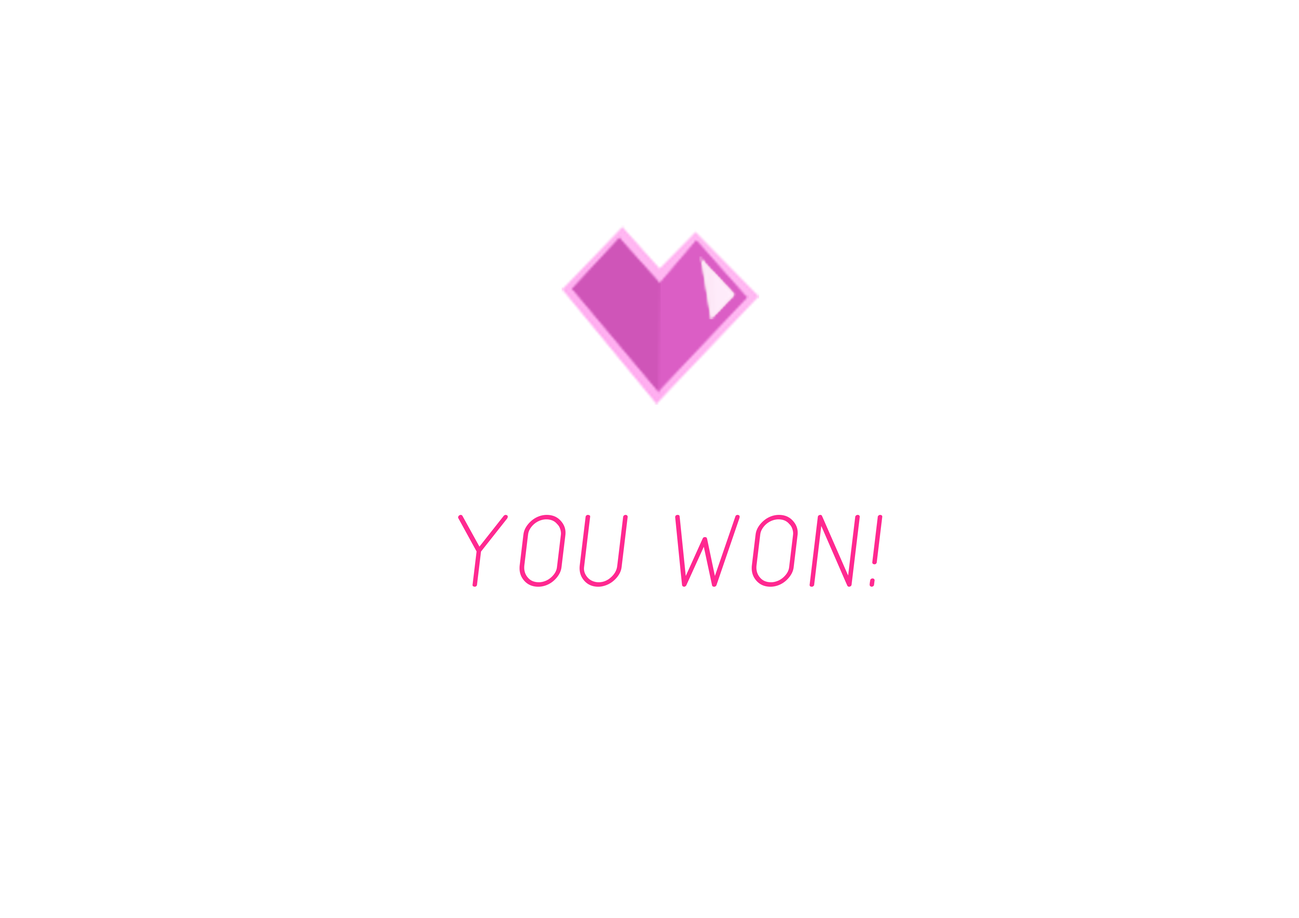
<style>
.page{position:relative;width:1299px;height:918px;background:#ffffff}
.page>*{position:absolute;margin:0}
.t1{font:108px "SWIsop1";color:#ff2990}
</style>
<div class="page">
<p class="t1" style="left:458px;top:515px;width:424px;height:72px">YOU WON!</p>
</div>
